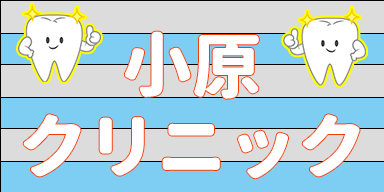
<style>
.page{position:relative;width:384px;height:192px;background:#dcdcdc}
.page>*{position:absolute;margin:0}
.t1{font:69.8px/79.8px "GenJyuuGothic-Monospace-Heavy";color:#ffffff}
</style>
<div class="page">
<p class="t1" style="left:23px;top:31px;width:337px;height:148px;text-align:center">小原<br>クリニック</p>
</div>
